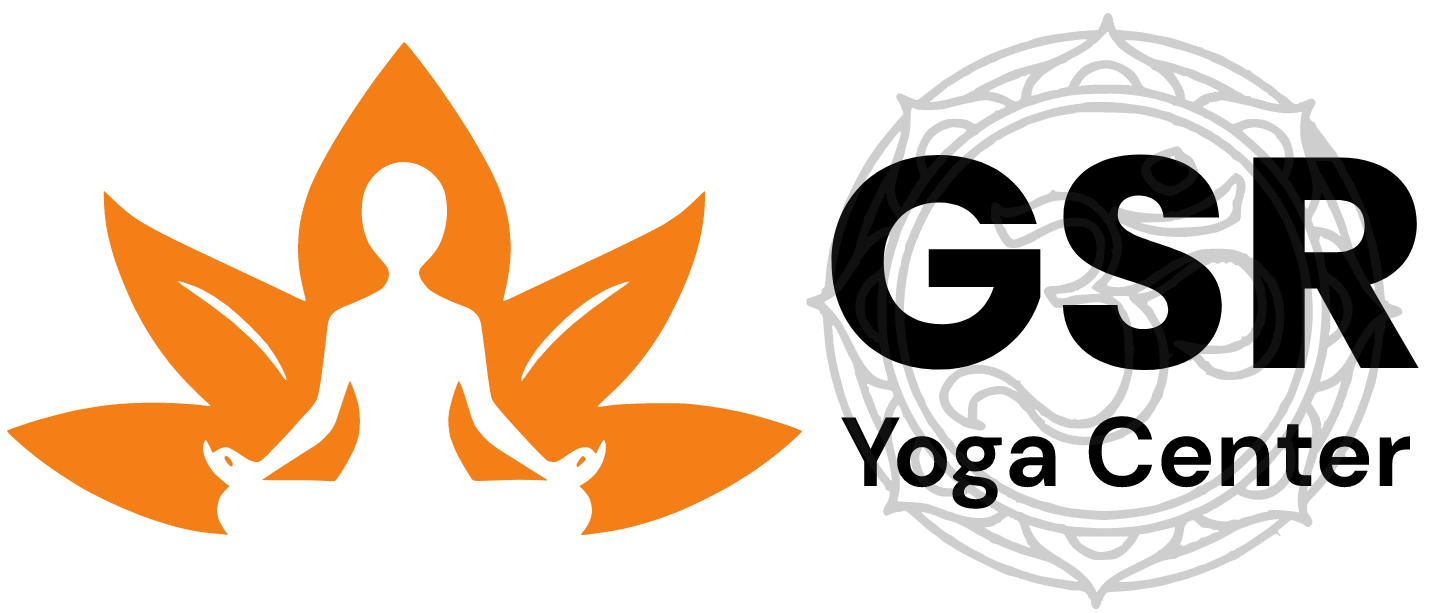
<style>
.page{position:relative;width:1445px;height:613px;background:#ffffff}
.page>*{position:absolute;margin:0}
.t1{font:98px "DMSans-Bold";color:#000000}
.t2{font:300px "Poppins-Bold";color:#000000}
</style>
<div class="page">
<p class="t1" style="left:831px;top:154px;width:588px;height:355px;text-align:center"><span class="t2">GSR<br></span>Yoga Center</p>
</div>
